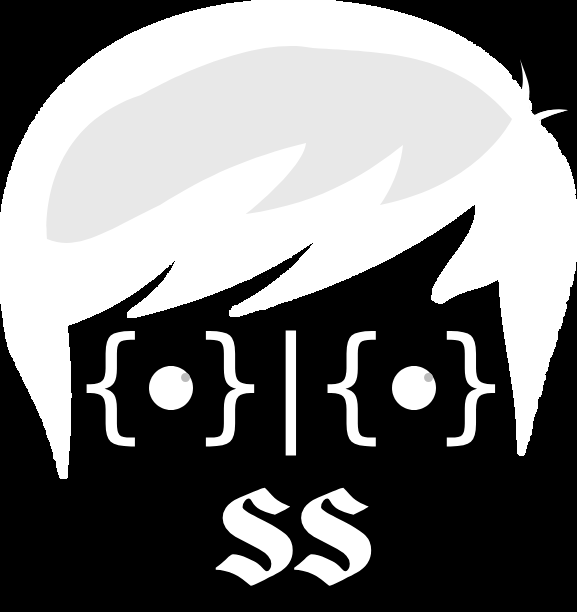
<style>
.page{position:relative;width:577px;height:612px;background:#000000}
.page>*{position:absolute;margin:0}
.t1{font:125px "DejaVuSans";color:#ffffff}
.t2{font:125px "Deutsch-Gothic";color:#ffffff}
</style>
<div class="page">
<p class="t1" style="left:86px;top:330px;width:410px;height:126px">{ }|{ }</p>
<p class="t2" style="left:215px;top:487px;width:157px;height:99px">SS</p>
</div>
